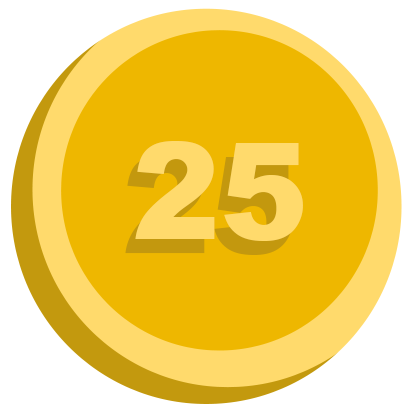
<style>
.page{position:relative;width:412px;height:412px;background:#eeb700}
.page>*{position:absolute;margin:0}
.t1{font:133.5px "Arial-Black";color:#ffda6c}
.t2{font:133.5px "Arial-Black"}
</style>
<div class="page">
<p class="t1" style="left:135px;top:141px;width:168px;height:100px">25</p>
<p class="t2" style="left:125px;top:155px;width:168px;height:100px">25</p>
</div>
